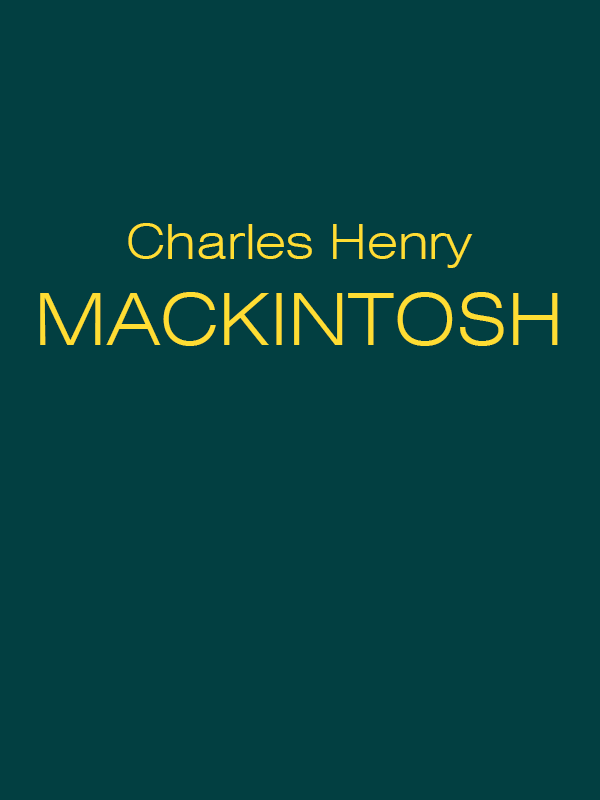
<style>
.page{position:relative;width:600px;height:800px;background:#023f41}
.page>*{position:absolute;margin:0}
.t1{font:48px "Swiss721BT-LightExtended";color:#ffdd33}
.t2{font:72px "Swiss721BT-LightExtended";color:#ffdd33}
</style>
<div class="page">
<p class="t1" style="left:40px;top:223px;width:518px;height:123px;text-align:center">Charles Henry<br><span class="t2">MACKINTOSH</span></p>
</div>
